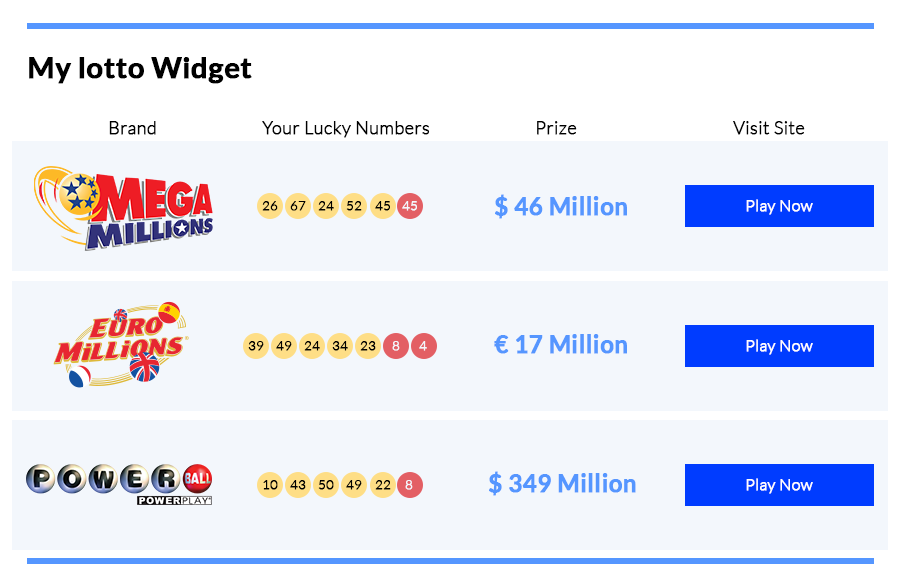
<style>
.page{position:relative;width:900px;height:582px;background:#f3f7fc}
.page>*{position:absolute;margin:0}
.t1{font:29px "Lato-Bold";color:#000000;font-weight:bold}
.t2{font:18px "Lato-Light";color:#000000;font-weight:bold}
.t3{font:24px "Lato-Bold";color:#5596ff;font-weight:bold}
.t4{font:13px "Lato-Light";color:#000000;font-weight:bold}
.t5{font:13px "Lato-Light";color:#f3f7fc;font-weight:bold}
.t6{font:16px "Lato-Light";color:#fefefe;font-weight:bold}
</style>
<div class="page">
<p class="t1" style="left:29px;top:57px;width:223px;height:27px">My lotto Widget</p>
<p class="t2" style="left:109px;top:121px;width:47px;height:14px">Brand</p>
<p class="t2" style="left:262px;top:121px;width:168px;height:17px">Your Lucky Numbers</p>
<p class="t2" style="left:537px;top:121px;width:40px;height:14px">Prize</p>
<p class="t2" style="left:733px;top:121px;width:72px;height:14px">Visit Site</p>
<p class="t3" style="left:495px;top:194px;width:132px;height:25px">$ 46 Million</p>
<p class="t4" style="left:262px;top:201px;width:16px;height:10px">26</p>
<p class="t4" style="left:290px;top:201px;width:16px;height:10px">67</p>
<p class="t4" style="left:318px;top:201px;width:16px;height:10px">24</p>
<p class="t4" style="left:346px;top:201px;width:16px;height:10px">52</p>
<p class="t4" style="left:375px;top:201px;width:15px;height:10px">45</p>
<p class="t5" style="left:402px;top:201px;width:15px;height:10px">45</p>
<p class="t6" style="left:746px;top:199px;width:67px;height:16px">Play Now</p>
<p class="t4" style="left:248px;top:341px;width:16px;height:10px">39</p>
<p class="t4" style="left:276px;top:341px;width:16px;height:10px">49</p>
<p class="t4" style="left:304px;top:341px;width:16px;height:10px">24</p>
<p class="t4" style="left:332px;top:341px;width:16px;height:10px">34</p>
<p class="t4" style="left:360px;top:341px;width:16px;height:10px">23</p>
<p class="t5" style="left:392px;top:341px;width:8px;height:10px">8</p>
<p class="t5" style="left:419px;top:341px;width:8px;height:10px">4</p>
<p class="t3" style="left:494px;top:334px;width:133px;height:20px">€ 17 Million</p>
<p class="t6" style="left:746px;top:339px;width:67px;height:16px">Play Now</p>
<p class="t3" style="left:489px;top:471px;width:147px;height:25px">$ 349 Million</p>
<p class="t4" style="left:263px;top:480px;width:15px;height:10px">10</p>
<p class="t4" style="left:290px;top:480px;width:16px;height:10px">43</p>
<p class="t4" style="left:318px;top:480px;width:16px;height:10px">50</p>
<p class="t4" style="left:346px;top:480px;width:16px;height:10px">49</p>
<p class="t4" style="left:375px;top:480px;width:16px;height:10px">22</p>
<p class="t5" style="left:405px;top:480px;width:8px;height:10px">8</p>
<p class="t6" style="left:746px;top:478px;width:67px;height:16px">Play Now</p>
</div>
